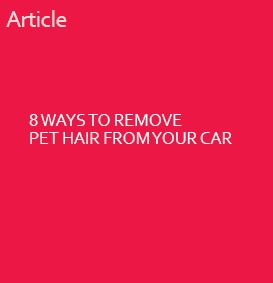
<style>
.page{position:relative;width:273px;height:283px;background:#ec1744}
.page>*{position:absolute;margin:0}
.t1{font:24px "Corbel";letter-spacing:-0.025em;color:#ffd9da}
.t2{font:18px/18px "Corbel";letter-spacing:-0.01em;color:#f8f9fa}
</style>
<div class="page">
<p class="t1" style="left:6px;top:10px;width:61px;height:17px">Article</p>
<p class="t2" style="left:29px;top:114px;width:203px;height:30px">8 WAYS TO REMOVE <br>PET HAIR FROM YOUR CAR</p>
</div>
